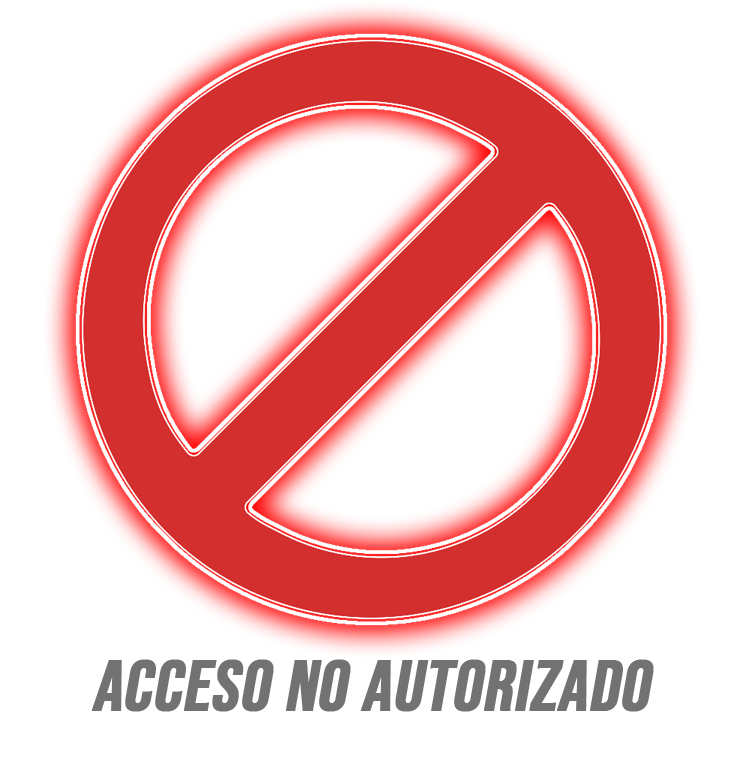
<style>
.page{position:relative;width:749px;height:771px;background:#ffffff}
.page>*{position:absolute;margin:0}
.t1{font:72px "BebasNeue-Regular";color:#737272;font-weight:bold;font-style:italic}
</style>
<div class="page">
<p class="t1" style="left:91px;top:659px;width:563px;height:53px">aCCESO NO AUTORIZADO</p>
</div>
